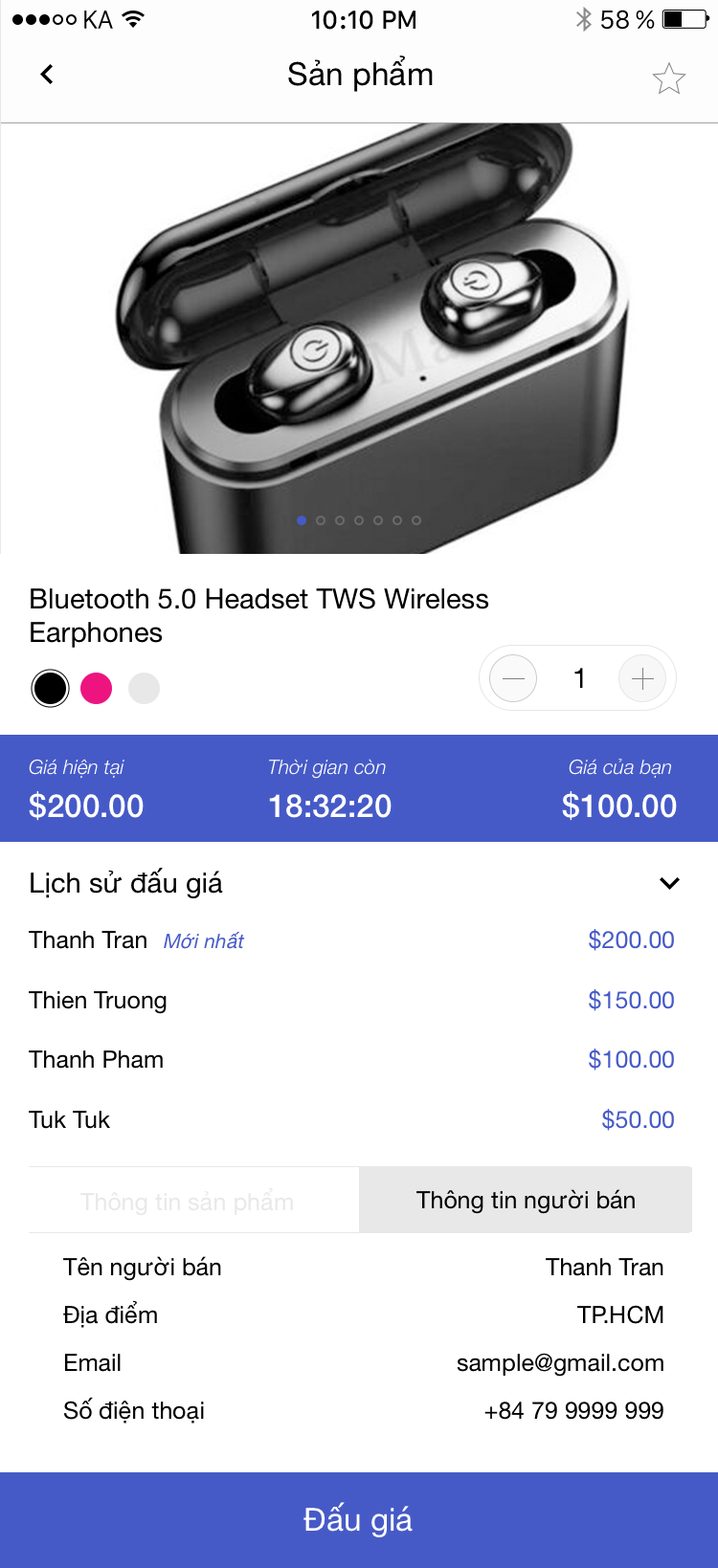
<style>
.page{position:relative;width:718px;height:1568px;background:#ffffff}
.page>*{position:absolute;margin:0}
.t1{font:31.9px "HelveticaNeue";color:#000000}
.t2{font:27.9px "HelveticaNeue";color:#000000}
.t3{font:19.9px "HelveticaNeue-LightItalic";color:#ffffff}
.t4{font:31.9px "HelveticaNeue-Medium";color:#ffffff}
.t5{font:23.9px/59.8px "HelveticaNeue";color:#465ac7}
.t6{font:23.9px/59.8px "HelveticaNeue";color:#000000}
.t7{font:19.9px "HelveticaNeue-Italic";color:#465ac7}
.t8{font:23.9px "HelveticaNeue";color:#e8e8e9}
.t9{font:23.9px "HelveticaNeue";color:#000000}
.t10{font:23.9px/47.8px "HelveticaNeue";color:#000000}
.t11{font:31.9px "HelveticaNeue";color:#ffffff}
</style>
<div class="page">
<p class="t1" style="left:288px;top:55px;width:144px;height:37px">Sản phẩm</p>
<p class="t2" style="left:31px;top:587px;width:458px;height:61px">Bluetooth 5.0 Headset TWS Wireless<br>Earphones</p>
<p class="t2" style="left:574px;top:668px;width:9px;height:20px">1</p>
<p class="t3" style="left:29px;top:759px;width:95px;height:20px">Giá hiện tại</p>
<p class="t3" style="left:269px;top:759px;width:117px;height:20px">Thời gian còn</p>
<p class="t3" style="left:568px;top:759px;width:103px;height:19px">Giá của bạn</p>
<p class="t4" style="left:29px;top:791px;width:115px;height:30px">$200.00</p>
<p class="t4" style="left:269px;top:794px;width:122px;height:24px">18:32:20</p>
<p class="t4" style="left:562px;top:791px;width:114px;height:30px">$100.00</p>
<p class="t2" style="left:31px;top:868px;width:192px;height:31px">Lịch sử đấu giá</p>
<p class="t5" style="left:588px;top:929px;width:86px;height:202px;text-align:right">$200.00<br>$150.00<br>$100.00<br>$50.00</p>
<p class="t6" style="left:29px;top:931px;width:137px;height:198px">Thanh Tran<br>Thien Truong<br>Thanh Pham<br>Tuk Tuk</p>
<p class="t7" style="left:164px;top:932px;width:81px;height:17px">Mới nhất</p>
<p class="t8" style="left:80px;top:1187px;width:213px;height:29px">Thông tin sản phẩm</p>
<p class="t9" style="left:416px;top:1189px;width:218px;height:25px">Thông tin người bán</p>
<p class="t10" style="left:63px;top:1256px;width:158px;height:168px">Tên người bán<br>Địa điểm<br>Email<br>Số điện thoại</p>
<p class="t10" style="left:456px;top:1258px;width:207px;height:162px;text-align:right">Thanh Tran<br>TP.HCM<br>sample@gmail.com<br>+84 79 9999 999</p>
<p class="t11" style="left:303px;top:1502px;width:109px;height:35px">Đấu giá</p>
</div>
